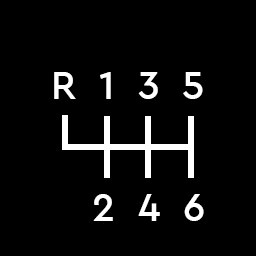
<style>
.page{position:relative;width:256px;height:256px;background:#000000}
.page>*{position:absolute;margin:0}
.t1{font:40.9px "CeraPROModern-Medium";color:#ffffff}
</style>
<div class="page">
<p class="t1" style="left:54px;top:72px;width:149px;height:27px">R  1  3  5</p>
<p class="t1" style="left:93px;top:194px;width:111px;height:27px">2  4  6</p>
</div>
